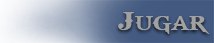
<style>
.page{position:relative;width:214px;height:43px}
.page>*{position:absolute;margin:0}
.t1{font:28px "GodOfWar";color:#a1a1a1}
</style>
<div class="page">
<p class="t1" style="left:118px;top:12px;width:92px;height:22px">Jugar</p>
</div>
